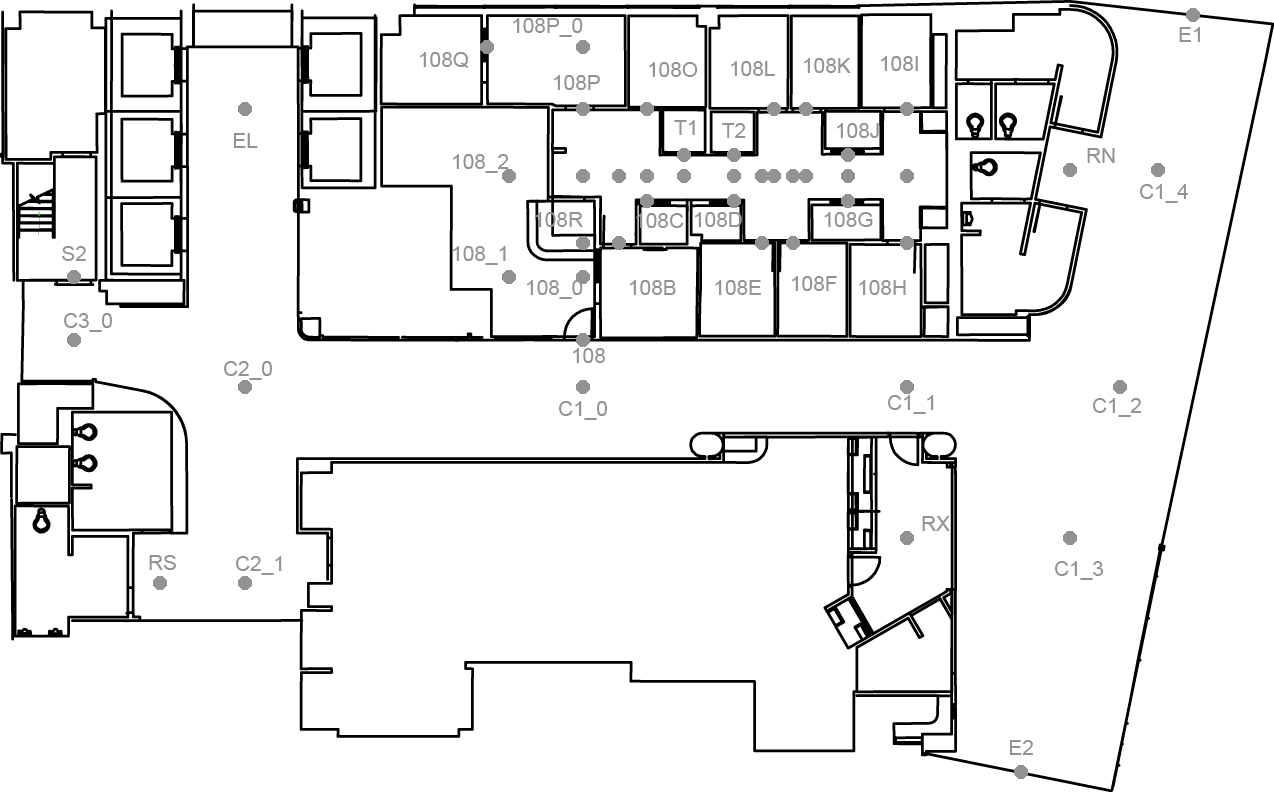
<style>
.page{position:relative;width:1274px;height:792px;background:#ffffff}
.page>*{position:absolute;margin:0}
.t1{font:20.8px "ArialMT";color:#929292;font-variant:small-caps}
</style>
<div class="page">
<p class="t1" style="left:513px;top:18px;width:70px;height:19px">108P_0</p>
<p class="t1" style="left:1179px;top:27px;width:21px;height:15px">E1</p>
<p class="t1" style="left:420px;top:52px;width:49px;height:16px">108Q</p>
<p class="t1" style="left:649px;top:62px;width:49px;height:15px">108O</p>
<p class="t1" style="left:731px;top:61px;width:44px;height:15px">108L</p>
<p class="t1" style="left:804px;top:58px;width:47px;height:15px">108K</p>
<p class="t1" style="left:881px;top:56px;width:37px;height:15px">108I</p>
<p class="t1" style="left:554px;top:75px;width:46px;height:15px">108P</p>
<p class="t1" style="left:674px;top:120px;width:21px;height:15px">T1</p>
<p class="t1" style="left:722px;top:123px;width:24px;height:15px">T2</p>
<p class="t1" style="left:837px;top:123px;width:42px;height:15px">108J</p>
<p class="t1" style="left:233px;top:133px;width:25px;height:15px">EL</p>
<p class="t1" style="left:1087px;top:148px;width:28px;height:15px">RN</p>
<p class="t1" style="left:453px;top:154px;width:56px;height:19px">108_2</p>
<p class="t1" style="left:1140px;top:184px;width:48px;height:19px">C1_4</p>
<p class="t1" style="left:535px;top:212px;width:48px;height:15px">108R</p>
<p class="t1" style="left:636px;top:213px;width:48px;height:15px">108C</p>
<p class="t1" style="left:695px;top:212px;width:47px;height:15px">108D</p>
<p class="t1" style="left:824px;top:212px;width:49px;height:15px">108G</p>
<p class="t1" style="left:62px;top:246px;width:24px;height:15px">S2</p>
<p class="t1" style="left:453px;top:246px;width:53px;height:19px">108_1</p>
<p class="t1" style="left:527px;top:280px;width:56px;height:19px">108_0</p>
<p class="t1" style="left:630px;top:280px;width:46px;height:15px">108B</p>
<p class="t1" style="left:715px;top:280px;width:46px;height:15px">108E</p>
<p class="t1" style="left:792px;top:276px;width:45px;height:15px">108F</p>
<p class="t1" style="left:859px;top:280px;width:47px;height:15px">108H</p>
<p class="t1" style="left:64px;top:313px;width:48px;height:19px">C3_0</p>
<p class="t1" style="left:573px;top:348px;width:32px;height:15px">108</p>
<p class="t1" style="left:224px;top:361px;width:48px;height:19px">C2_0</p>
<p class="t1" style="left:559px;top:401px;width:48px;height:19px">C1_0</p>
<p class="t1" style="left:888px;top:395px;width:46px;height:19px">C1_1</p>
<p class="t1" style="left:1093px;top:398px;width:48px;height:19px">C1_2</p>
<p class="t1" style="left:922px;top:516px;width:28px;height:15px">RX</p>
<p class="t1" style="left:149px;top:555px;width:27px;height:15px">RS</p>
<p class="t1" style="left:236px;top:556px;width:46px;height:19px">C2_1</p>
<p class="t1" style="left:1055px;top:561px;width:49px;height:19px">C1_3</p>
<p class="t1" style="left:1009px;top:740px;width:24px;height:15px">E2</p>
</div>
